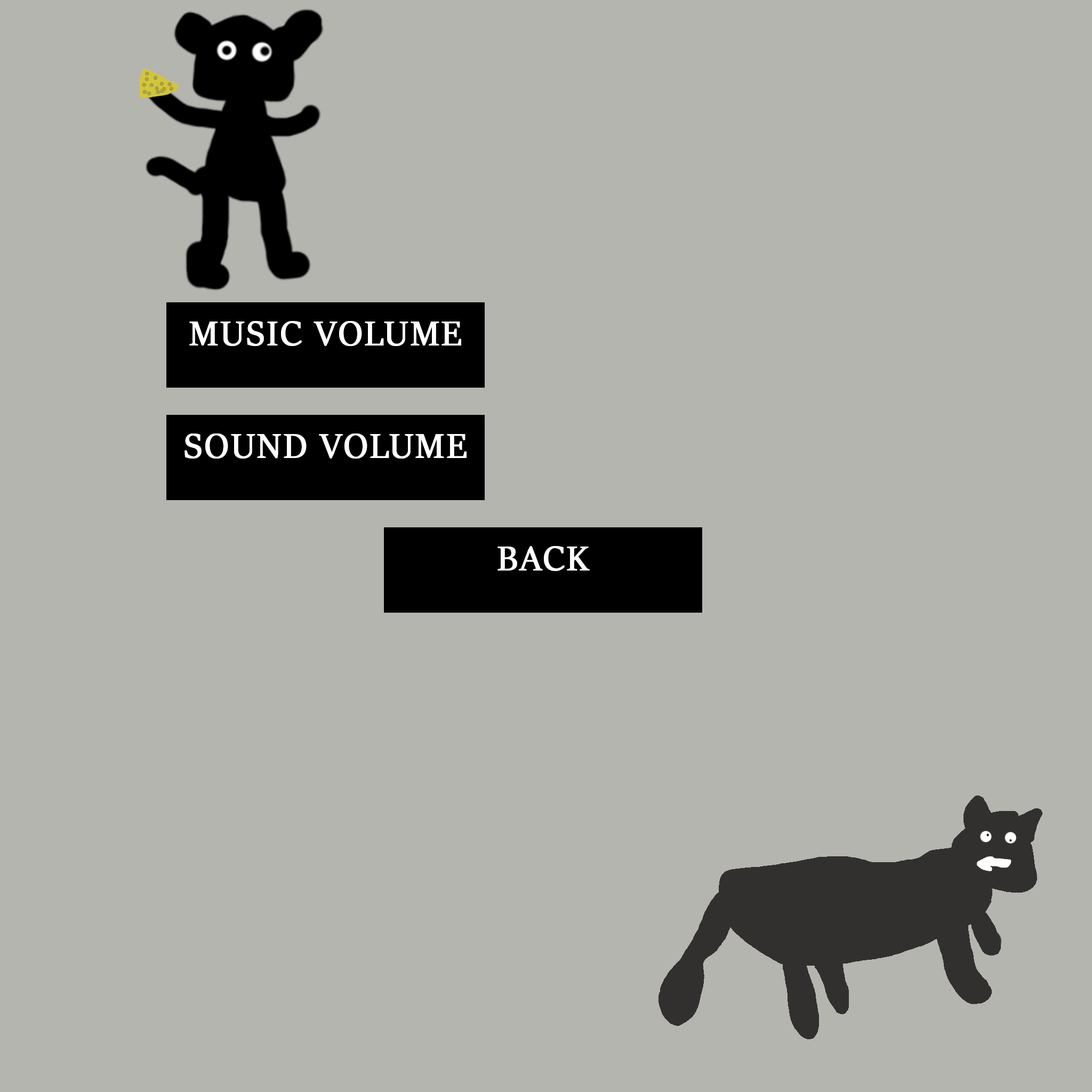
<style>
.page{position:relative;width:1092px;height:1092px;background:#b5b5b0}
.page>*{position:absolute;margin:0}
.t1{font:38.4px "SitkaBanner";letter-spacing:0.04em;color:#ffffff;text-transform:uppercase;font-weight:bold}
</style>
<div class="page">
<p class="t1" style="left:189px;top:321px;width:272px;height:25px">Music volume</p>
<p class="t1" style="left:184px;top:433px;width:283px;height:26px">Sound volume</p>
<p class="t1" style="left:497px;top:546px;width:93px;height:25px">Back</p>
</div>
